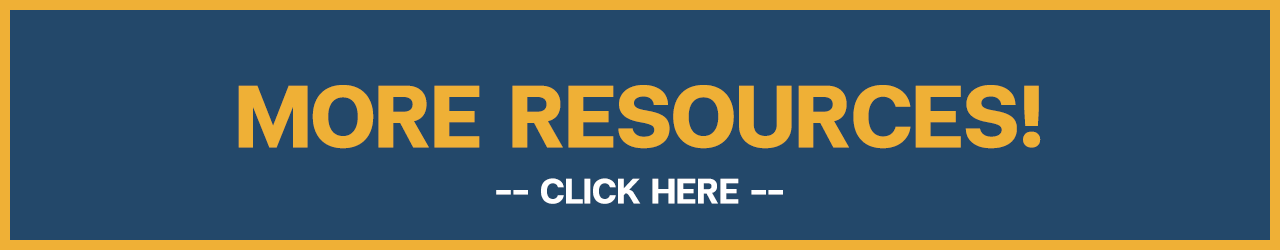
<style>
.page{position:relative;width:1280px;height:250px;background:#23486a}
.page>*{position:absolute;margin:0}
.t1{font:120px "FCMinimalBold";color:#efb036}
.t2{font:48px "FCMinimalBold";color:#ffffff}
</style>
<div class="page">
<p class="t1" style="left:238px;top:85px;width:803px;height:64px">MORE RESOURCES!</p>
<p class="t2" style="left:496px;top:178px;width:287px;height:26px">-- CLICK HERE --</p>
</div>
